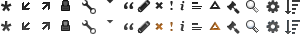
<style>
.page{position:relative;width:301px;height:35px;background:#ffffff}
.page>*{position:absolute;margin:0}
.t1{font:12px "Georgia-Bold";letter-spacing:0.01em;color:#222222}
.t2{font:12px "Georgia-BoldItalic";letter-spacing:0.01em;color:#222222}
.t3{font:12px "Georgia-Bold";letter-spacing:0.01em}
.t4{font:12px "Georgia-BoldItalic";letter-spacing:0.01em;color:#3a3a3a}
</style>
<div class="page">
<p class="t1" style="left:170px;top:1px;width:3px;height:9px">!</p>
<p class="t2" style="left:180px;top:1px;width:5px;height:10px">i</p>
<p class="t3" style="left:170px;top:22px;width:3px;height:9px">!</p>
<p class="t4" style="left:180px;top:21px;width:5px;height:10px">i</p>
</div>
